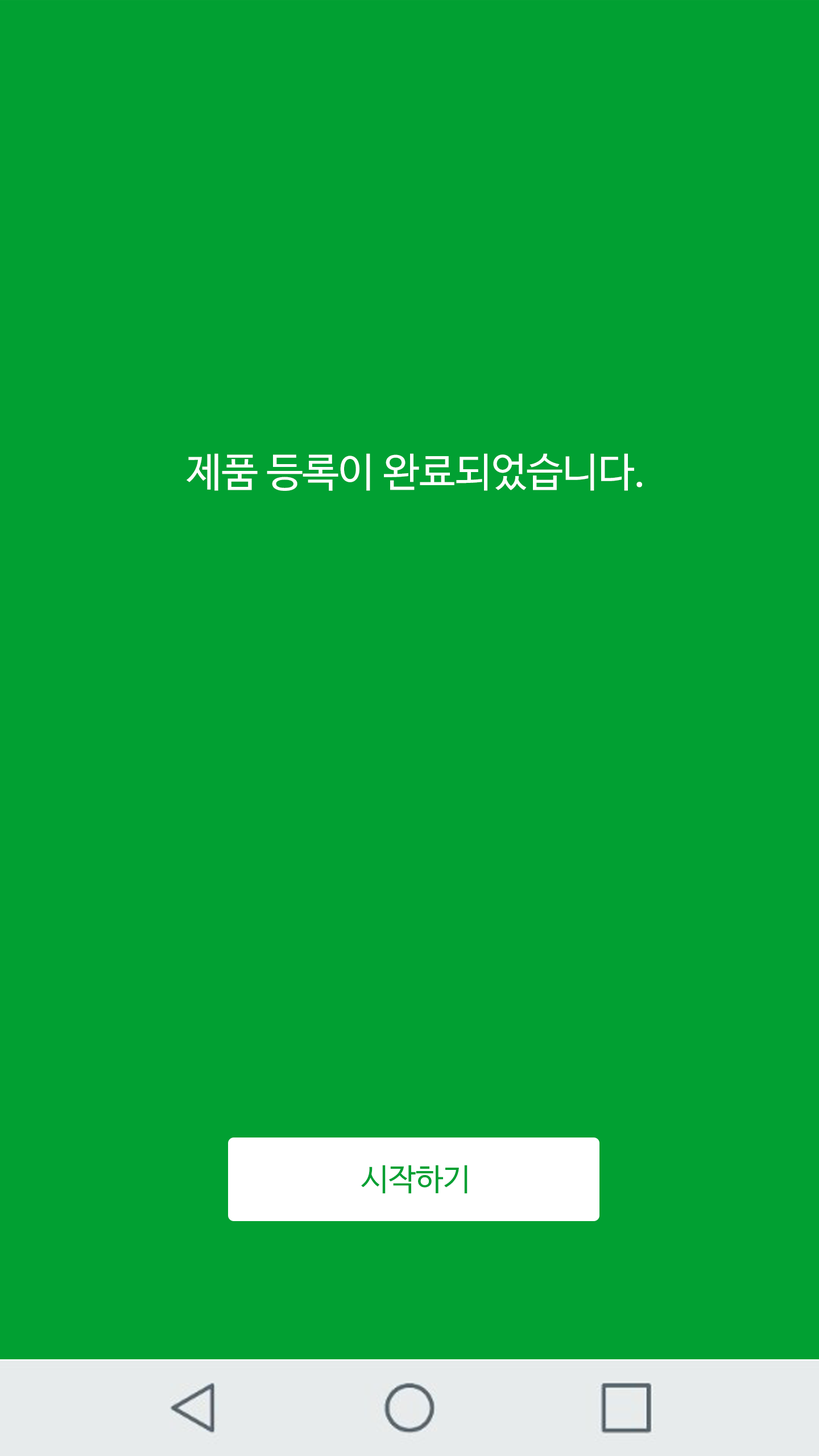
<style>
.page{position:relative;width:819px;height:1456px;background:#01a032}
.page>*{position:absolute;margin:0}
.t1{font:40.3px "NanumBarunGothicOTF";color:#ffffff}
.t2{font:30.8px "NanumBarunGothicOTF";color:#01a032}
</style>
<div class="page">
<p class="t1" style="left:187px;top:453px;width:455px;height:38px">제품 등록이 완료되었습니다.</p>
<p class="t2" style="left:361px;top:1165px;width:107px;height:29px">시작하기</p>
</div>
